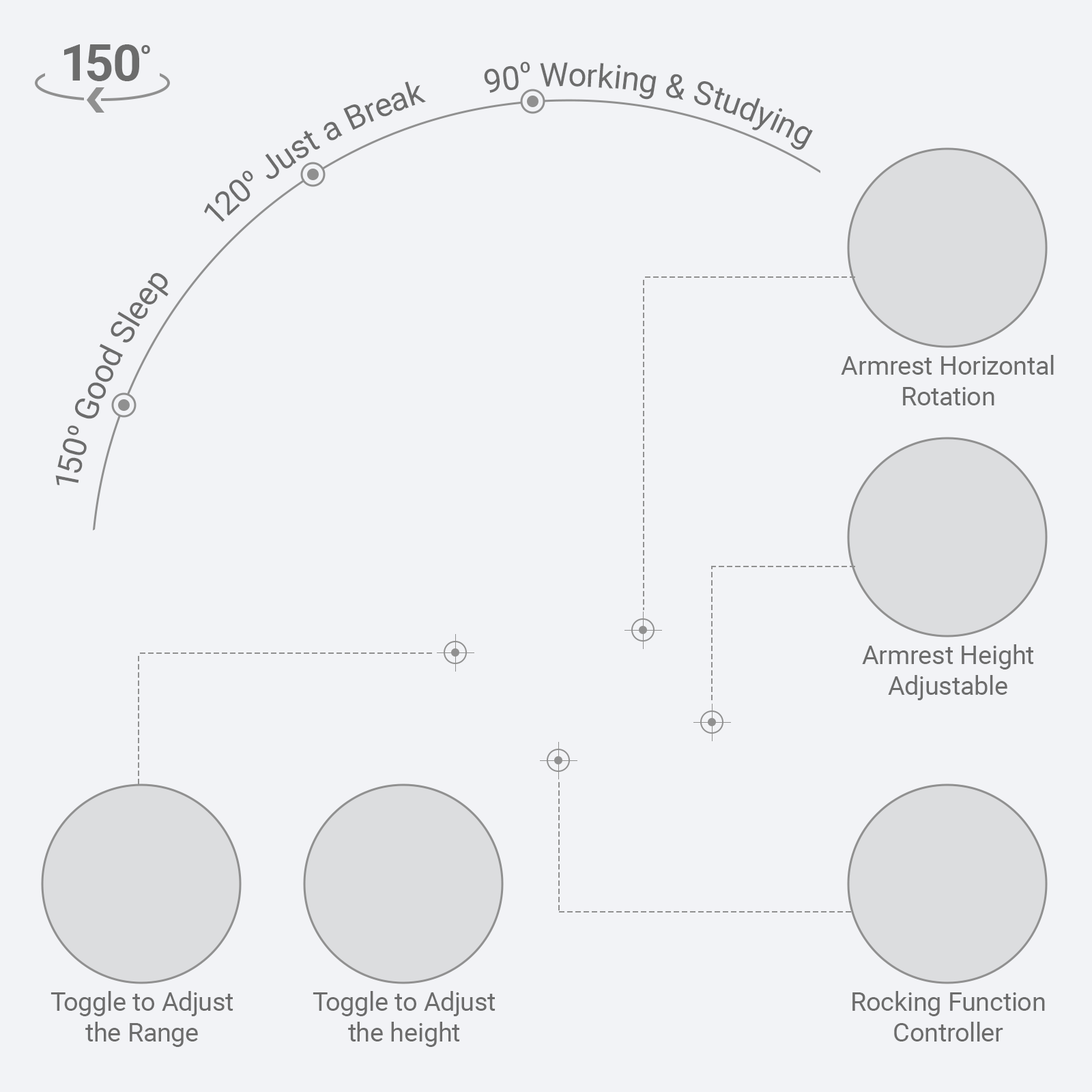
<style>
.page{position:relative;width:1092px;height:1092px;background:#f2f3f6}
.page>*{position:absolute;margin:0}
.t1{font:50.5px "Roboto-Bold";color:#6c6c6c}
.t2{font:17.1px "Roboto-Bold";color:#6c6c6c}
.t3{font:32.8px "Roboto-Regular";color:#6c6c6c}
.t4{font:15px "Roboto-Bold";color:#6c6c6c}
.t5{font:25.9px "Roboto-Regular";color:#6c6c6c}
</style>
<div class="page">
<p class="t1" style="left:64px;top:44px;width:86px;height:37px">150<span class="t2">o</span></p>
<p class="t3" style="left:484px;top:61px;width:329px;height:89px;text-align:center">90<span class="t4">O</span> Working &amp; Studying</p>
<p class="t3" style="left:204px;top:81px;width:223px;height:141px;text-align:center">120<span class="t4">O </span>Just a Break</p>
<p class="t3" style="left:55px;top:273px;width:114px;height:212px;text-align:center">150<span class="t4">O </span>Good Sleep</p>
<p class="t5" style="left:841px;top:355px;width:213px;height:50px;text-align:center">Armrest Horizontal<br>Rotation</p>
<p class="t5" style="left:862px;top:644px;width:172px;height:56px;text-align:center">Armrest Height<br>Adjustable</p>
<p class="t5" style="left:51px;top:991px;width:182px;height:56px;text-align:center">Toggle to Adjust<br>the Range</p>
<p class="t5" style="left:313px;top:991px;width:182px;height:56px;text-align:center">Toggle to Adjust<br>the height</p>
<p class="t5" style="left:852px;top:991px;width:193px;height:50px;text-align:center">Rocking Function<br>Controller</p>
</div>
